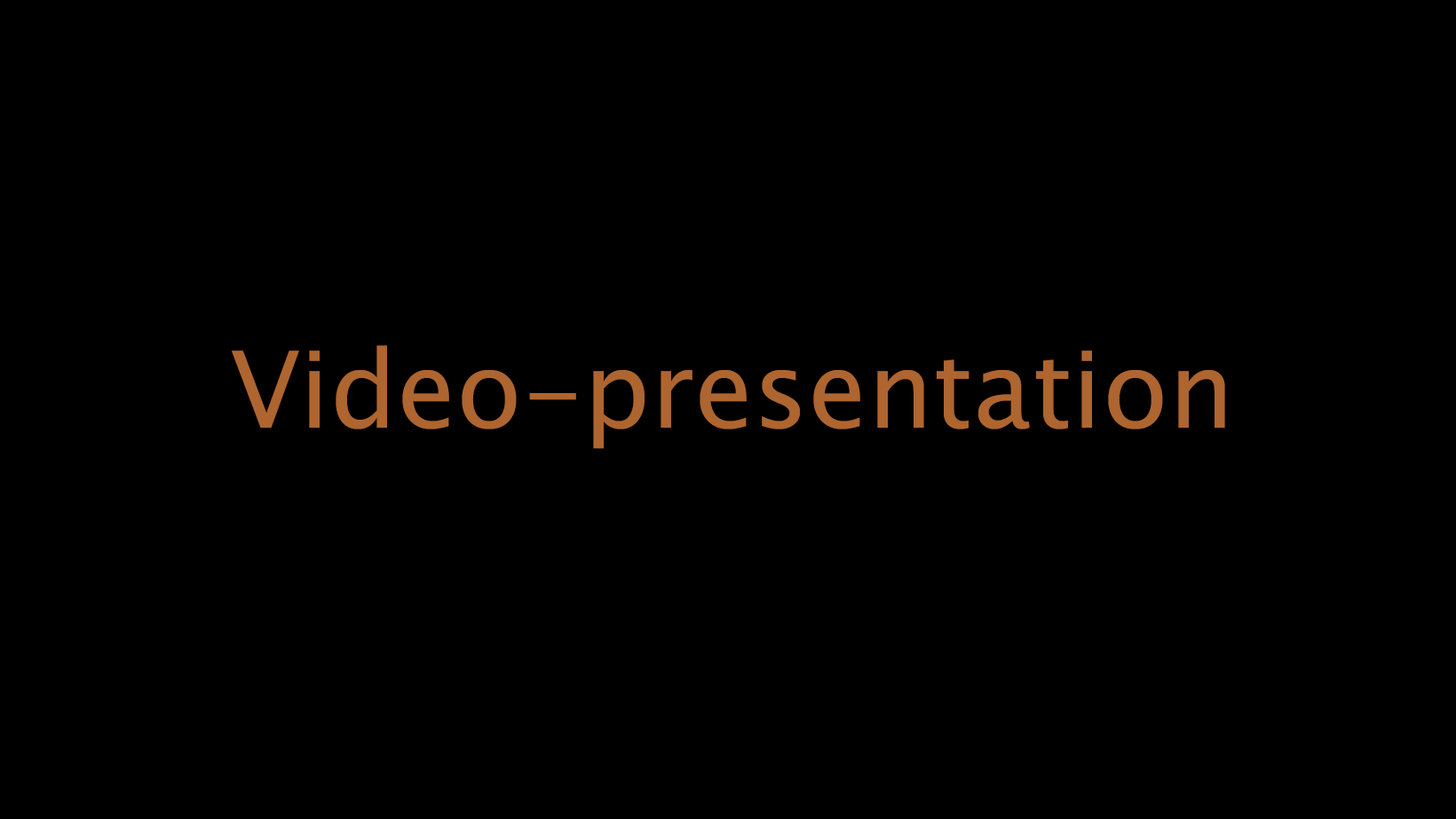
<style>
.page{position:relative;width:1456px;height:819px;background:#000000}
.page>*{position:absolute;margin:0}
.t1{font:106.5px "LucidaSansUnicode";color:#ae652f}
</style>
<div class="page">
<p class="t1" style="left:232px;top:345px;width:993px;height:104px">Video-presentation</p>
</div>
